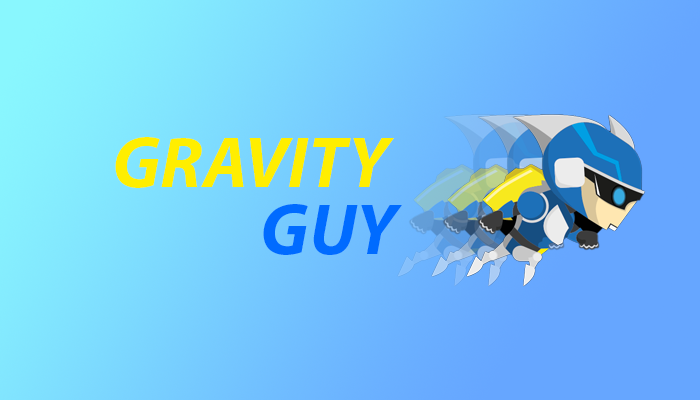
<style>
.page{position:relative;width:700px;height:400px}
.page>*{position:absolute;margin:0}
.t1{font:72px "MyriadPro-BoldIt";color:#ffee00}
.t2{font:72px "MyriadPro-BoldIt";color:#006bff}
</style>
<div class="page">
<p class="t1" style="left:115px;top:137px;width:279px;height:51px">GRAVITY</p>
<p class="t2" style="left:263px;top:204px;width:139px;height:51px">GUY</p>
</div>
